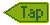
<style>
.page{position:relative;width:50px;height:25px;background:#8bac0f}
.page>*{position:absolute;margin:0}
.t1{font:18px "Munro";color:#306230}
</style>
<div class="page">
<p class="t1" style="left:21px;top:6px;width:22px;height:16px">Tap</p>
</div>
